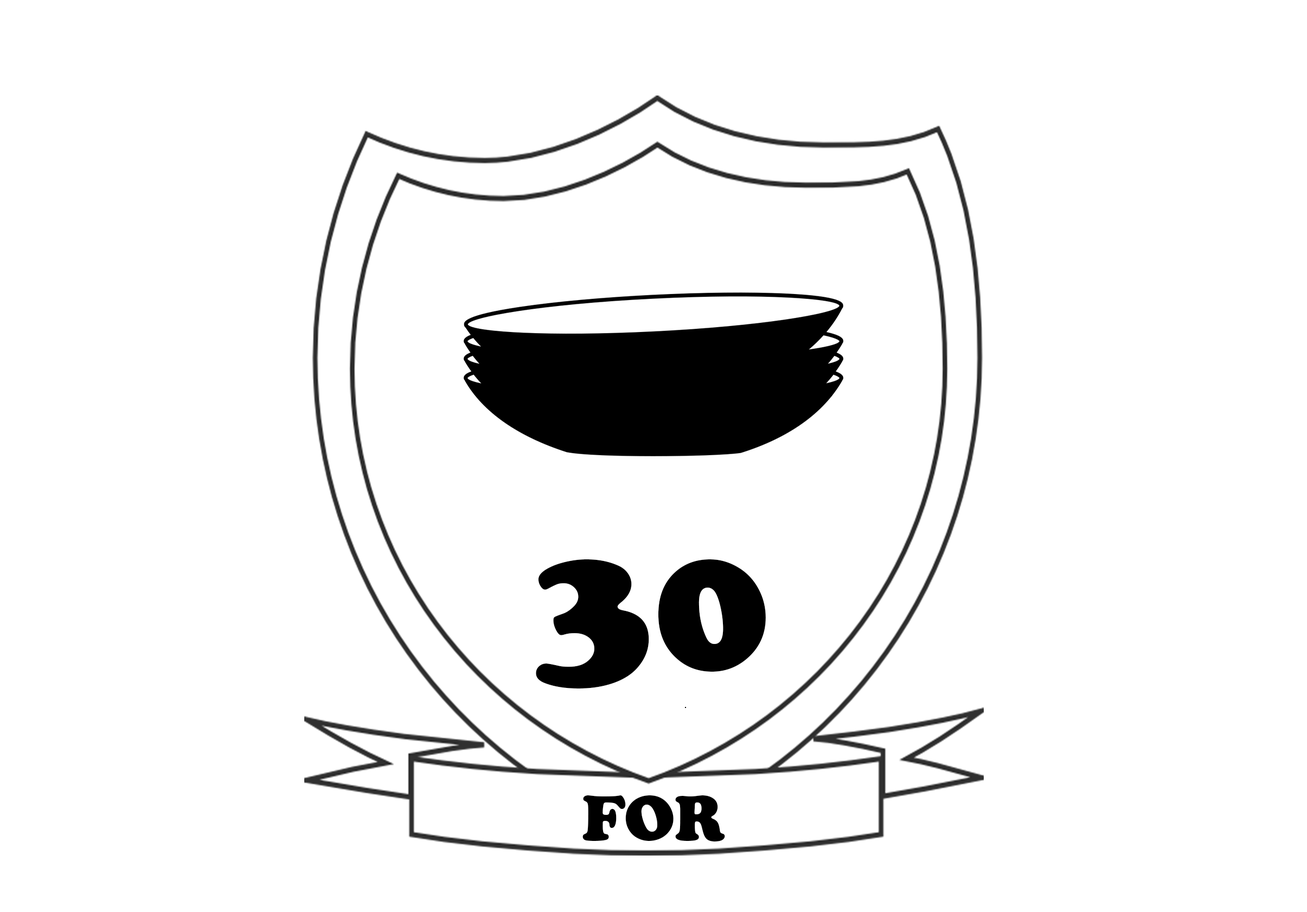
<style>
.page{position:relative;width:1307px;height:912px;background:#ffffff}
.page>*{position:absolute;margin:0}
.t1{font:195.3px "CooperBlack";color:#000000}
.t2{font:65.1px "CooperBlack";color:#000000}
</style>
<div class="page">
<p class="t1" style="left:536px;top:559px;width:230px;height:129px">30</p>
<p class="t2" style="left:583px;top:795px;width:142px;height:46px">FOR</p>
</div>
